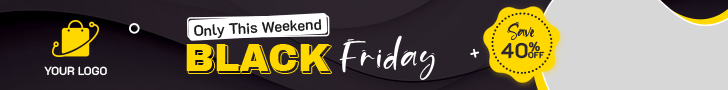
<style>
.page{position:relative;width:728px;height:90px;background:#d7d7d7}
.page>*{position:absolute;margin:0}
.t1{font:15px "K2D-SemiBold";color:#1d1a1c}
.t2{font:21.3px "Sand-Beach";color:#2f2730}
.t3{font:46.8px "Sand-Beach";letter-spacing:0.055em;color:#ffffff}
.t4{font:21.3px "K2D-Bold";color:#2f2730}
.t5{font:38.1px "ArchivoBlack-Regular";color:#ffd800}
.t6{font:8.5px "K2D-Bold";color:#2f2730}
.t7{font:11.7px "K2D-Bold";color:#ffffff}
</style>
<div class="page">
<p class="t1" style="left:194px;top:19px;width:128px;height:19px;rotate:-3deg">Only This Weekend</p>
<p class="t2" style="left:507px;top:22px;width:27px;height:18px">Save</p>
<p class="t3" style="left:339px;top:35px;width:96px;height:45px">Friday</p>
<p class="t4" style="left:501px;top:41px;width:39px;height:18px">40%</p>
<p class="t5" style="left:186px;top:44px;width:144px;height:27px">BLACK</p>
<p class="t5" style="left:188px;top:46px;width:144px;height:27px">BLACK</p>
<p class="t6" style="left:528px;top:51px;width:17px;height:8px">OFF</p>
<p class="t7" style="left:44px;top:66px;width:63px;height:10px">YOUR LOGO</p>
</div>
